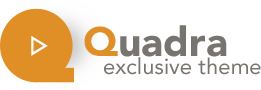
<style>
.page{position:relative;width:261px;height:90px;background:#ffffff}
.page>*{position:absolute;margin:0}
.t1{font:40.6px "Avenir-Black";color:#78746f}
.t2{font:40.6px "Avenir-Black";color:#e08f26}
.t3{font:22px "Avenir-Roman";color:#78746f}
</style>
<div class="page">
<p class="t1" style="left:84px;top:25px;width:143px;height:32px"><span class="t2">Q</span>uadra</p>
<p class="t3" style="left:104px;top:57px;width:157px;height:18px">exclusive theme</p>
</div>
